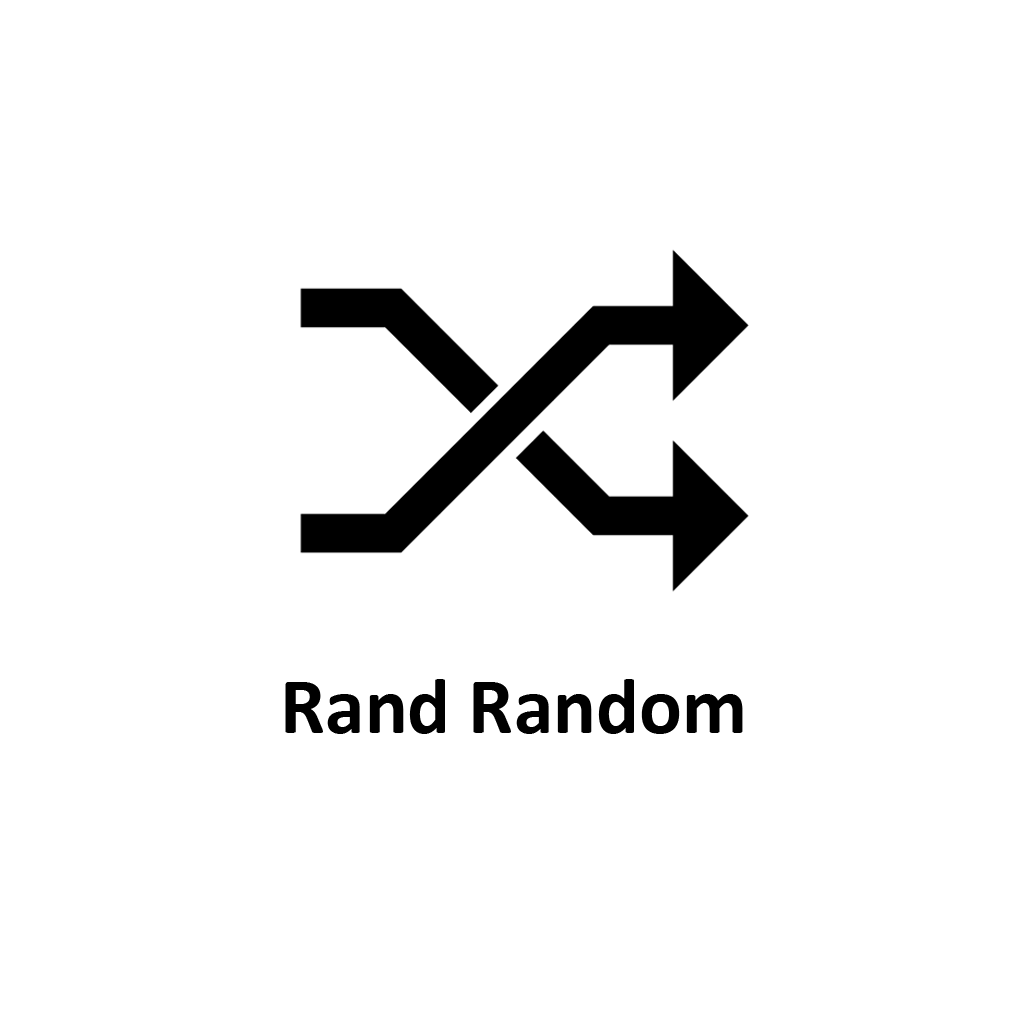
<style>
.page{position:relative;width:1024px;height:1024px;background:#ffffff}
.page>*{position:absolute;margin:0}
.t1{font:80px "Calibri-Bold";color:#000000}
</style>
<div class="page">
<p class="t1" style="left:285px;top:679px;width:458px;height:55px">Rand Random</p>
</div>
